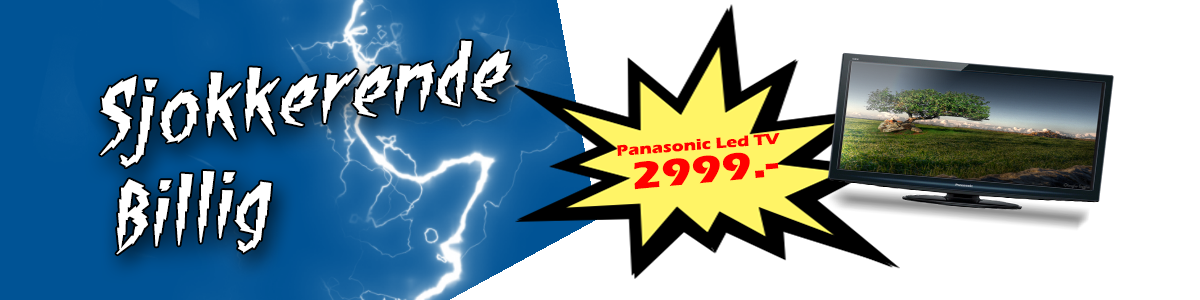
<style>
.page{position:relative;width:1200px;height:300px;background:#ffffff}
.page>*{position:absolute;margin:0}
.t1{font:84.5px "ShockTherapyBB-Italic";color:#ffffff;scale:1.15 1}
.t2{font:15.6px "ErasITC-Bold";color:#ff0000;scale:1.18 1}
.t3{font:39.3px "ErasITC-Bold";color:#ff0000;scale:1.18 1}
</style>
<div class="page">
<p class="t1" style="left:100px;top:40px;width:411px;height:215px;rotate:-7deg">Sjokkerende<br>Billig</p>
<p class="t2" style="left:617px;top:133px;width:163px;height:23px;rotate:-4deg">Panasonic Led TV</p>
<p class="t3" style="left:634px;top:152px;width:145px;height:38px;rotate:-5deg">2999.-</p>
</div>
